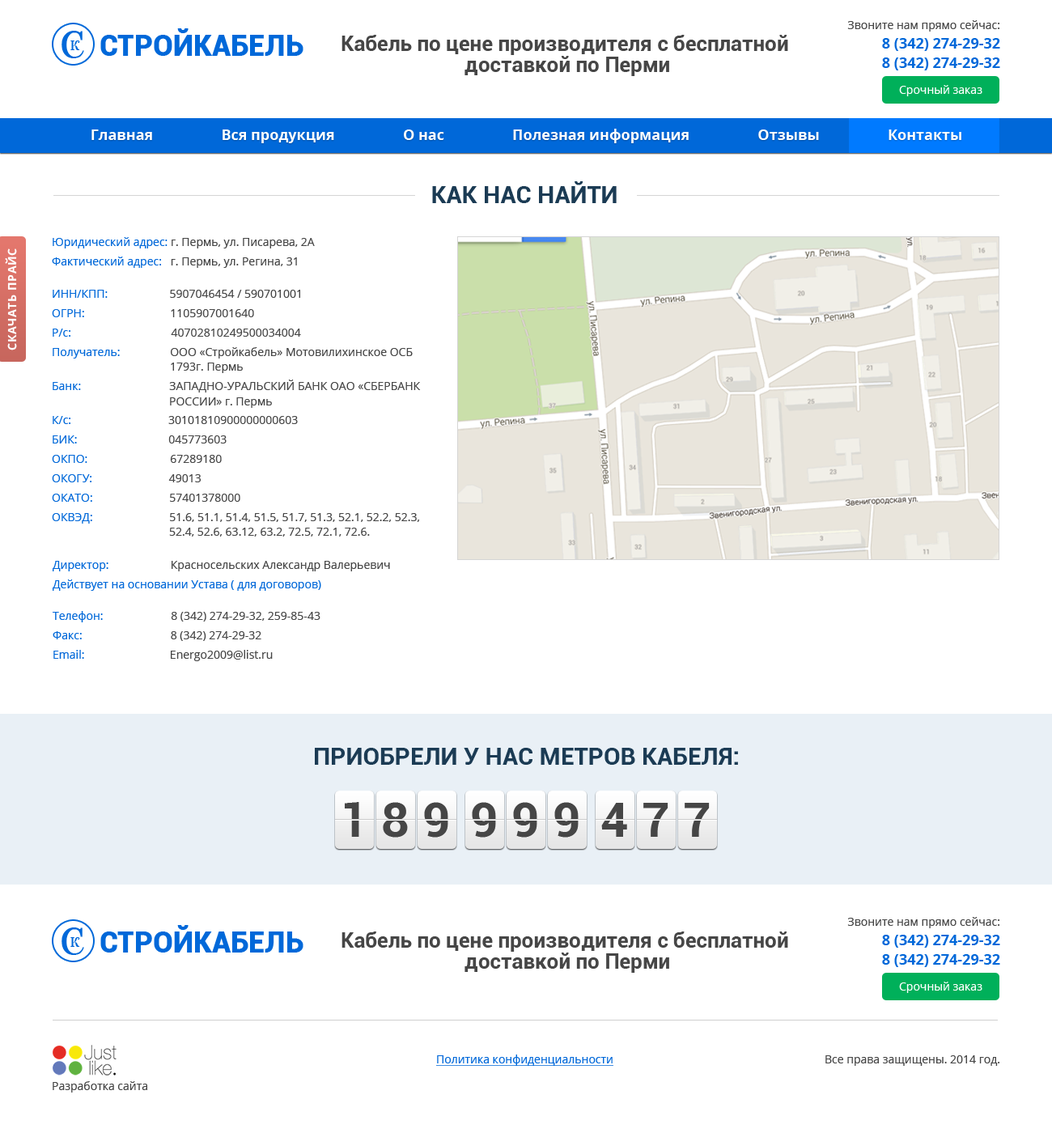
<style>
.page{position:relative;width:1052px;height:1133px;background:#ffffff}
.page>*{position:absolute;margin:0}
.t1{font:29.1px "Roboto-Black";color:#0068d9;text-transform:uppercase}
.t2{font:14.6px/19.4px "OpenSans-Bold";color:#0068d9}
.t3{font:11.3px/14.6px "OpenSans";color:#464646}
.t4{font:38.9px "Aver";color:#0068d9}
.t5{font:14.6px "Aver";color:#0068d9}
.t6{font:21px/21px "Roboto-Bold";color:#464646}
.t7{font:11.3px "OpenSans";color:#ffffff}
.t8{font:14.6px "OpenSans-Bold";color:#ffffff}
.t9{font:24.3px "Roboto-Bold";color:#1b3b54;text-transform:uppercase}
.t10{font:11.3px/19.4px "OpenSans";color:#464646}
.t11{font:11.3px/19.4px "OpenSans";color:#0068d9}
.t12{font:11.3px "OpenSans-Bold";letter-spacing:0.05em;color:#ffffff;text-transform:uppercase}
.t13{font:11.3px/14.6px "OpenSans";color:#0068d9}
.t14{font:11.3px "OpenSans";color:#464646}
.t15{font:48.6px "Roboto-Bold";letter-spacing:-0.05em;color:#464646;text-transform:uppercase}
.t16{font:11.3px "OpenSans";color:#0068d9;text-decoration:underline}
</style>
<div class="page">
<p class="t1" style="left:100px;top:28px;width:204px;height:28px">Стройкабель</p>
<p class="t2" style="left:847px;top:20px;width:153px;height:50px;text-align:right"><span class="t3">Звоните нам прямо сейчас:<br></span>8 (342) 274-29-32<br>8 (342) 274-29-32</p>
<p class="t4" style="left:62px;top:31px;width:22px;height:27px">С</p>
<p class="t5" style="left:70px;top:40px;width:10px;height:10px">К</p>
<p class="t6" style="left:342px;top:35px;width:446px;height:41px;text-align:center">Кабель по цене производителя с бесплатной <br>доставкой по Перми</p>
<p class="t7" style="left:899px;top:85px;width:84px;height:11px">Срочный заказ</p>
<p class="t8" style="left:91px;top:129px;width:871px;height:14px">Главная                  Вся продукция                  О нас                  Полезная информация                  Отзывы                  Контакты</p>
<p class="t9" style="left:432px;top:181px;width:185px;height:22px">как нас найти</p>
<p class="t10" style="left:52px;top:237px;width:263px;height:31px"><span class="t11">Юридический адрес:</span> г. Пермь, ул. Писарева, 2А<br><span class="t11">Фактический адрес:</span>   г. Пермь, ул. Регина, 31</p>
<p class="t12" style="left:5px;top:248px;width:12px;height:102px;rotate:-90deg">Скачать прайс</p>
<p class="t10" style="left:52px;top:290px;width:369px;height:234px"><span class="t11">ИНН/КПП:</span>                     5907046454 / 590701001<br><span class="t11">ОГРН:</span>                             1105907001640<br><span class="t11">Р/с:</span>                                  40702810249500034004<br><span class="t11">Получатель:</span>                 ООО «Стройкабель» Мотовилихинское ОСБ<br><br><span class="t13">Банк:</span><span class="t3">                              ЗАПАДНО-УРАЛЬСКИЙ БАНК ОАО «СБЕРБАНК <br><br></span><span class="t11">К/с:</span>                                 30101810900000000603<br><span class="t11">БИК:</span>                               045773603<br><span class="t11">ОКПО:</span>                            67289180<br><span class="t11">ОКОГУ:</span>                          49013<br><span class="t11">ОКАТО:</span>                          57401378000<br><span class="t11">ОКВЭД:</span>                          51.6, 51.1, 51.4, 51.5, 51.7, 51.3, 52.1, 52.2, 52.3,</p>
<p class="t14" style="left:171px;top:363px;width:72px;height:10px">1793г. Пермь</p>
<p class="t14" style="left:170px;top:397px;width:102px;height:11px">РОССИИ» г. Пермь</p>
<p class="t14" style="left:169px;top:528px;width:201px;height:9px">52.4, 52.6, 63.12, 63.2, 72.5, 72.1, 72.6.</p>
<p class="t11" style="left:53px;top:561px;width:337px;height:30px">Директор:<span class="t10">                     Красносельских Александр Валерьевич<br></span>Действует на основании Устава ( для договоров)</p>
<p class="t10" style="left:53px;top:611px;width:268px;height:50px"><span class="t11">Телефон:</span>                       8 (342) 274-29-32, 259-85-43<br><span class="t11">Факс:                              </span>8 (342) 274-29-32<br><span class="t11">Email:                             </span>Energo2009@list.ru</p>
<p class="t9" style="left:315px;top:748px;width:423px;height:17px">Приобрели у нас метров кабеля:</p>
<p class="t15" style="left:345px;top:802px;width:14px;height:35px">1</p>
<p class="t15" style="left:383px;top:802px;width:25px;height:36px">8</p>
<p class="t15" style="left:424px;top:802px;width:24px;height:36px">9</p>
<p class="t15" style="left:472px;top:802px;width:24px;height:36px">9</p>
<p class="t15" style="left:513px;top:802px;width:24px;height:36px">9</p>
<p class="t15" style="left:554px;top:802px;width:25px;height:36px">9</p>
<p class="t15" style="left:601px;top:803px;width:26px;height:34px">4</p>
<p class="t15" style="left:643px;top:803px;width:26px;height:34px">7</p>
<p class="t15" style="left:685px;top:803px;width:25px;height:34px">7</p>
<p class="t2" style="left:847px;top:917px;width:153px;height:50px;text-align:right"><span class="t3">Звоните нам прямо сейчас:<br></span>8 (342) 274-29-32<br>8 (342) 274-29-32</p>
<p class="t4" style="left:62px;top:928px;width:22px;height:27px">С</p>
<p class="t1" style="left:100px;top:925px;width:204px;height:28px">Стройкабель</p>
<p class="t5" style="left:70px;top:937px;width:10px;height:10px">К</p>
<p class="t6" style="left:342px;top:932px;width:446px;height:41px;text-align:center">Кабель по цене производителя с бесплатной <br>доставкой по Перми</p>
<p class="t7" style="left:899px;top:982px;width:84px;height:11px">Срочный заказ</p>
<p class="t16" style="left:436px;top:1055px;width:178px;height:11px">Политика конфиденциальности</p>
<p class="t14" style="left:826px;top:1056px;width:174px;height:10px">Все права защищены. 2014 год.</p>
<p class="t14" style="left:53px;top:1081px;width:94px;height:12px">Разработка сайта</p>
</div>
